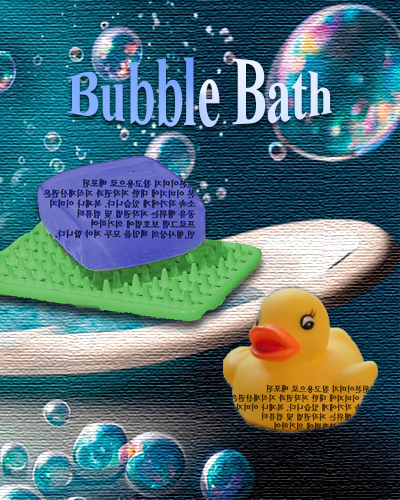
<style>
.page{position:relative;width:400px;height:500px}
.page>*{position:absolute;margin:0}
.t1{font:52px "TimesNewRomanPS-BoldMT";letter-spacing:-0.02em}
</style>
<div class="page">
<p class="t1" style="left:67px;top:57px;width:265px;height:71px">Bubble Bath</p>
</div>
